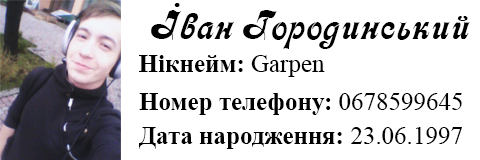
<style>
.page{position:relative;width:480px;height:160px;background:#ffffff}
.page>*{position:absolute;margin:0}
.t1{font:41.7px "Asessor";color:#000000}
.t2{font:25px "TimesNewRomanPS-BoldMT";color:#000000}
.t3{font:25px "TimesNewRomanPSMT";color:#000000}
</style>
<div class="page">
<p class="t1" style="left:151px;top:3px;width:319px;height:46px">Іван Городинський</p>
<p class="t2" style="left:139px;top:55px;width:186px;height:22px">Нікнейм: <span class="t3">Garpen</span></p>
<p class="t2" style="left:139px;top:93px;width:323px;height:22px">Номер телефону: <span class="t3">0678599645</span></p>
<p class="t2" style="left:139px;top:127px;width:323px;height:22px">Дата народження: <span class="t3">23.06.1997</span></p>
</div>
